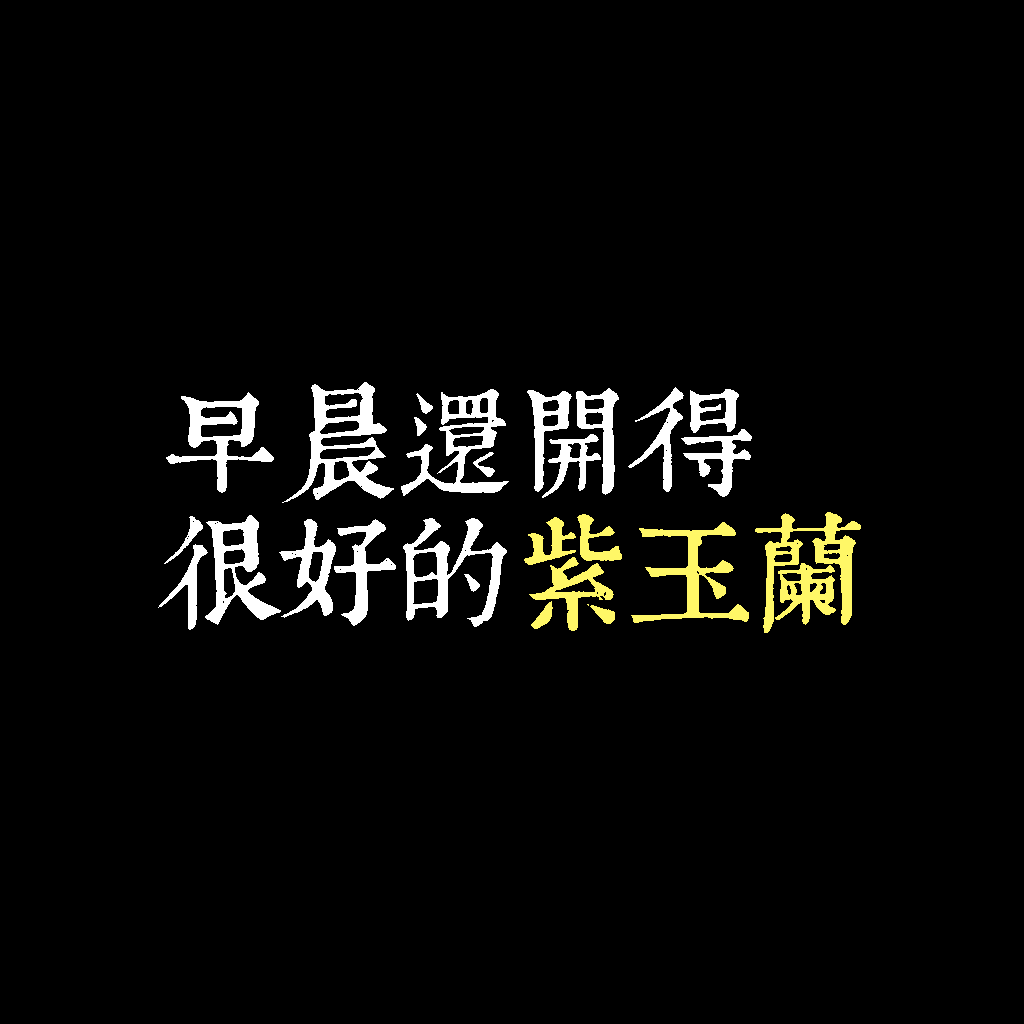
<style>
.page{position:relative;width:1024px;height:1024px;background:#000000}
.page>*{position:absolute;margin:0}
.t1{font:120px/130px "TpldKhangXiDictTrial";letter-spacing:-0.02em;color:#ffffff}
.t2{font:120px/130px "TpldKhangXiDictTrial";letter-spacing:-0.02em;color:#fff767}
</style>
<div class="page">
<p class="t1" style="left:158px;top:382px;width:703px;height:251px">早晨還開得<br>很好的<span class="t2">紫玉蘭</span></p>
</div>
